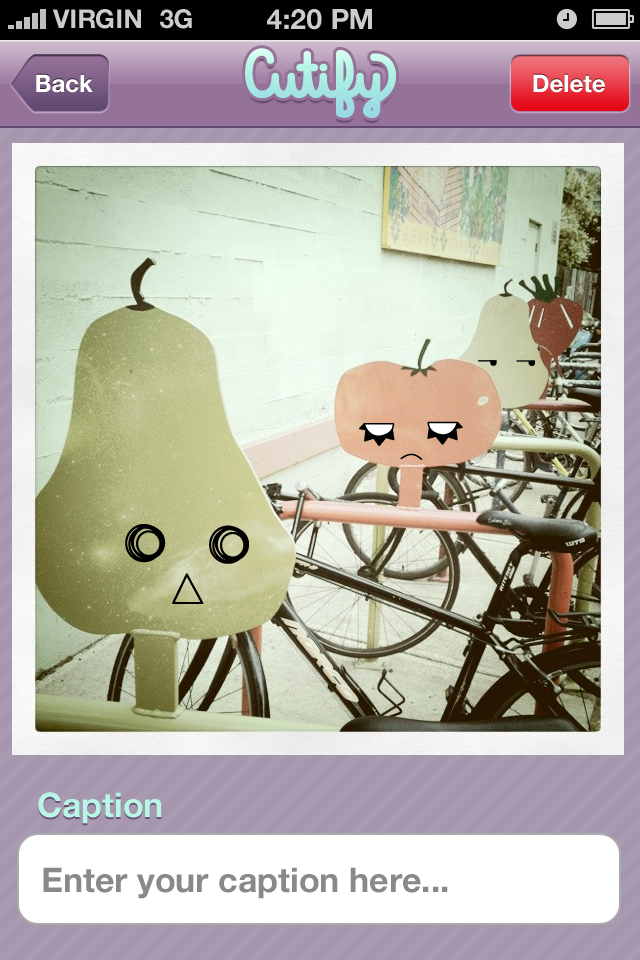
<style>
.page{position:relative;width:640px;height:960px}
.page>*{position:absolute;margin:0}
.t1{font:26px "HelveticaNeue-Bold";color:#cccccc;text-transform:uppercase}
.t2{font:28px "HelveticaNeue-Bold";color:#cccccc;text-transform:uppercase}
.t3{font:24px "HelveticaNeue-Bold";color:#ffffff}
.t4{font:34px "HelveticaNeue-Bold";color:#b8f6e5}
.t5{font:34px "HelveticaNeue-Bold";color:#898989}
</style>
<div class="page">
<p class="t1" style="left:52px;top:9px;width:89px;height:20px">VIRGIN</p>
<p class="t1" style="left:160px;top:9px;width:32px;height:20px">3G</p>
<p class="t2" style="left:267px;top:9px;width:105px;height:21px">4:20 pM</p>
<p class="t3" style="left:36px;top:74px;width:57px;height:19px">Back</p>
<p class="t3" style="left:533px;top:74px;width:72px;height:19px">Delete</p>
<p class="t4" style="left:38px;top:792px;width:124px;height:32px">Caption</p>
<p class="t5" style="left:43px;top:867px;width:405px;height:32px">Enter your caption here...</p>
</div>
